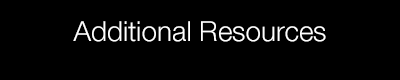
<style>
.page{position:relative;width:400px;height:80px;background:#000000}
.page>*{position:absolute;margin:0}
.t1{font:27.9px "HelveticaNeueLTCom-Lt";color:#ffffff}
</style>
<div class="page">
<p class="t1" style="left:73px;top:21px;width:253px;height:21px">Additional Resources</p>
</div>
